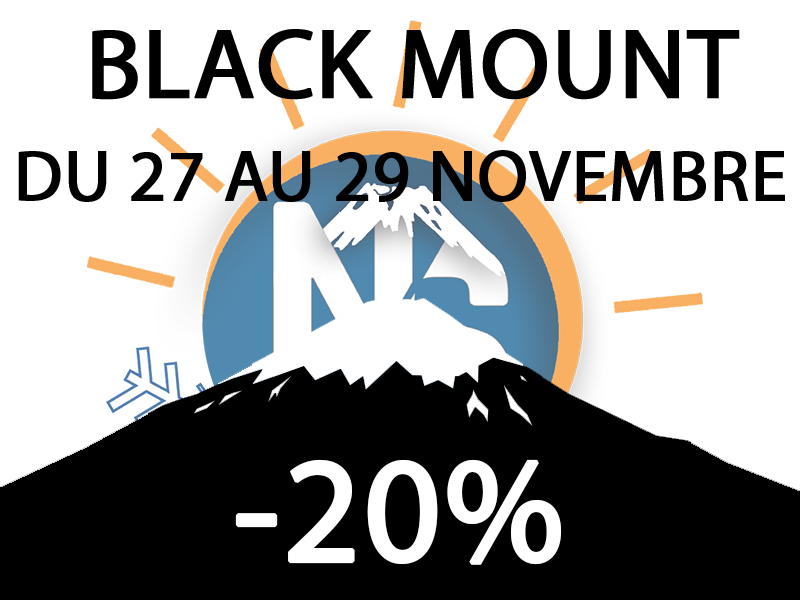
<style>
.page{position:relative;width:800px;height:600px;background:#ffffff}
.page>*{position:absolute;margin:0}
.t1{font:100px "MyriadPro-Regular";color:#000000;font-weight:bold}
.t2{font:72px "MyriadPro-Regular";color:#000000;font-weight:bold}
.t3{font:150px "MyriadPro-Regular";color:#ffffff;font-weight:bold}
</style>
<div class="page">
<p class="t1" style="left:92px;top:29px;width:648px;height:71px">BLACK MOUNT</p>
<p class="t2" style="left:18px;top:150px;width:767px;height:52px">DU 27 AU 29 NOVEMBRE</p>
<p class="t3" style="left:235px;top:459px;width:327px;height:106px">-20%</p>
</div>
